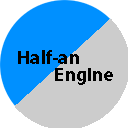
<style>
.page{position:relative;width:128px;height:128px;background:#cccccc}
.page>*{position:absolute;margin:0}
.t1{font:19.1px/17.7px "MyriadPro-Bold";color:#000000}
</style>
<div class="page">
<p class="t1" style="left:18px;top:50px;width:95px;height:35px">Half-an<br>       Engine</p>
</div>
